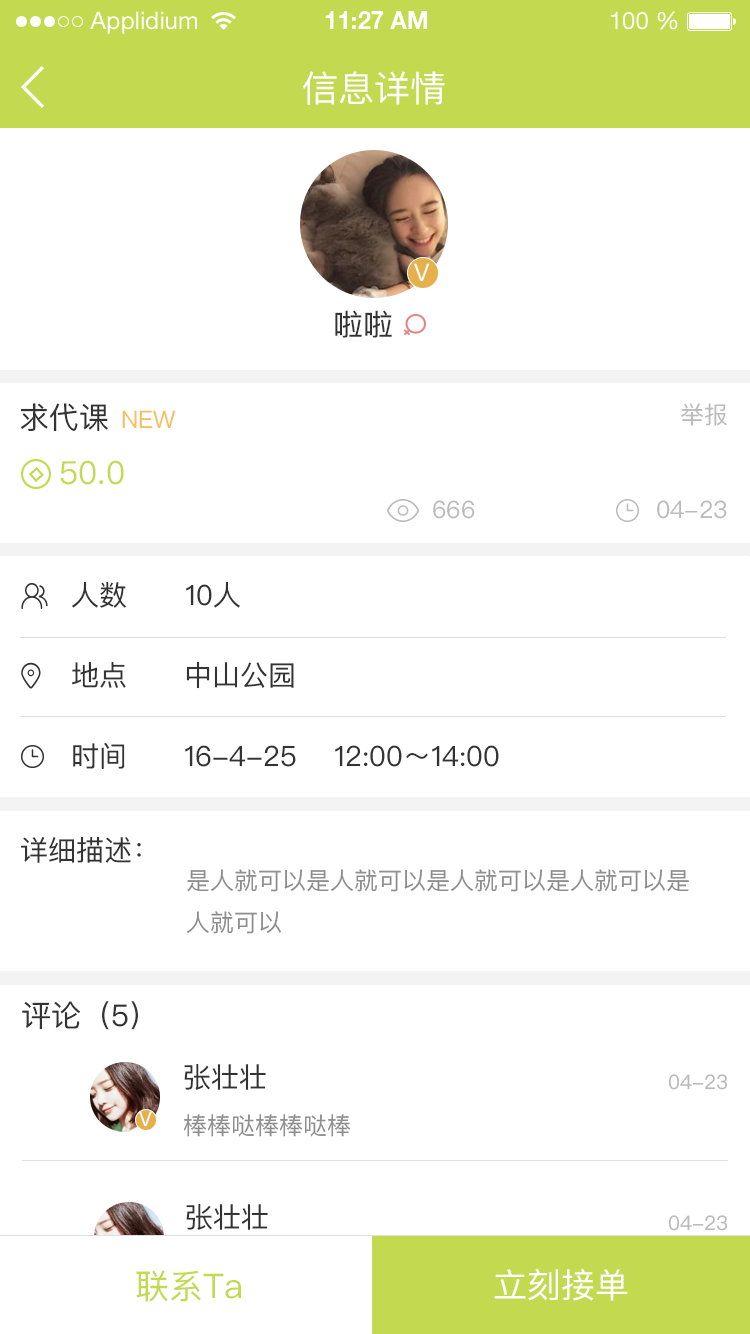
<style>
.page{position:relative;width:750px;height:1334px;background:#ffffff}
.page>*{position:absolute;margin:0}
.t1{font:24px "HelveticaNeueLTStd-Roman";color:#ffffff}
.t2{font:24px "HelveticaNeueLTStd-Bd";color:#ffffff}
.t3{font:36px "PingFangSC-Regular";color:#ffffff}
.t4{font:24px "PingFangSC-Regular";color:#ffffff}
.t5{font:30px "PingFangSC-Regular";color:#333333}
.t6{font:24px "PingFangSC-Regular";color:#f3c162}
.t7{font:24px "PingFangSC-Regular";color:#bbbbbb}
.t8{font:32px "PingFangSC-Regular";color:#c3d94f}
.t9{font:28px "PingFangSC-Regular";color:#333333}
.t10{font:24px "PingFangSC-Regular";color:#8e8e8e}
.t11{font:20px "PingFangSC-Regular";color:#bbbbbb}
.t12{font:20px "PingFangSC-Regular";color:#ffffff}
.t13{font:34px "PingFangSC-Regular";color:#c3d94f}
.t14{font:34px "PingFangSC-Regular";color:#ffffff}
</style>
<div class="page">
<p class="t1" style="left:90px;top:11px;width:107px;height:23px">Applidium</p>
<p class="t2" style="left:325px;top:11px;width:102px;height:18px">11:27 AM</p>
<p class="t1" style="left:611px;top:11px;width:67px;height:19px">100 %</p>
<p class="t3" style="left:303px;top:71px;width:142px;height:34px">信息详情</p>
<p class="t4" style="left:414px;top:263px;width:16px;height:18px">V</p>
<p class="t5" style="left:335px;top:310px;width:57px;height:28px">啦啦</p>
<p class="t5" style="left:21px;top:403px;width:87px;height:29px">求代课</p>
<p class="t6" style="left:122px;top:410px;width:54px;height:18px">NEW</p>
<p class="t7" style="left:681px;top:403px;width:46px;height:23px">举报</p>
<p class="t8" style="left:60px;top:460px;width:64px;height:25px">50.0</p>
<p class="t7" style="left:433px;top:500px;width:42px;height:19px">666</p>
<p class="t7" style="left:657px;top:500px;width:70px;height:19px">04-23</p>
<p class="t9" style="left:72px;top:582px;width:54px;height:26px">人数</p>
<p class="t9" style="left:186px;top:582px;width:54px;height:26px">10人</p>
<p class="t9" style="left:72px;top:662px;width:54px;height:26px">地点</p>
<p class="t9" style="left:186px;top:661px;width:108px;height:28px">中山公园</p>
<p class="t9" style="left:73px;top:742px;width:52px;height:27px">时间</p>
<p class="t9" style="left:185px;top:745px;width:314px;height:22px">16-4-25    12:00～14:00</p>
<p class="t9" style="left:21px;top:837px;width:120px;height:26px">详细描述：</p>
<p class="t10" style="left:186px;top:869px;width:503px;height:65px">是人就可以是人就可以是人就可以是人就可以是<br>人就可以</p>
<p class="t5" style="left:22px;top:1001px;width:116px;height:29px">评论（5）</p>
<p class="t9" style="left:184px;top:1064px;width:82px;height:26px">张壮壮</p>
<p class="t11" style="left:668px;top:1074px;width:60px;height:16px">04-23</p>
<p class="t12" style="left:139px;top:1111px;width:13px;height:16px">V</p>
<p class="t10" style="left:183px;top:1114px;width:168px;height:23px">棒棒哒棒棒哒棒</p>
<p class="t9" style="left:186px;top:1204px;width:82px;height:26px">张壮壮</p>
<p class="t11" style="left:668px;top:1215px;width:60px;height:16px">04-23</p>
<p class="t13" style="left:136px;top:1270px;width:105px;height:32px">联系Ta</p>
<p class="t14" style="left:494px;top:1269px;width:134px;height:32px">立刻接单</p>
</div>
